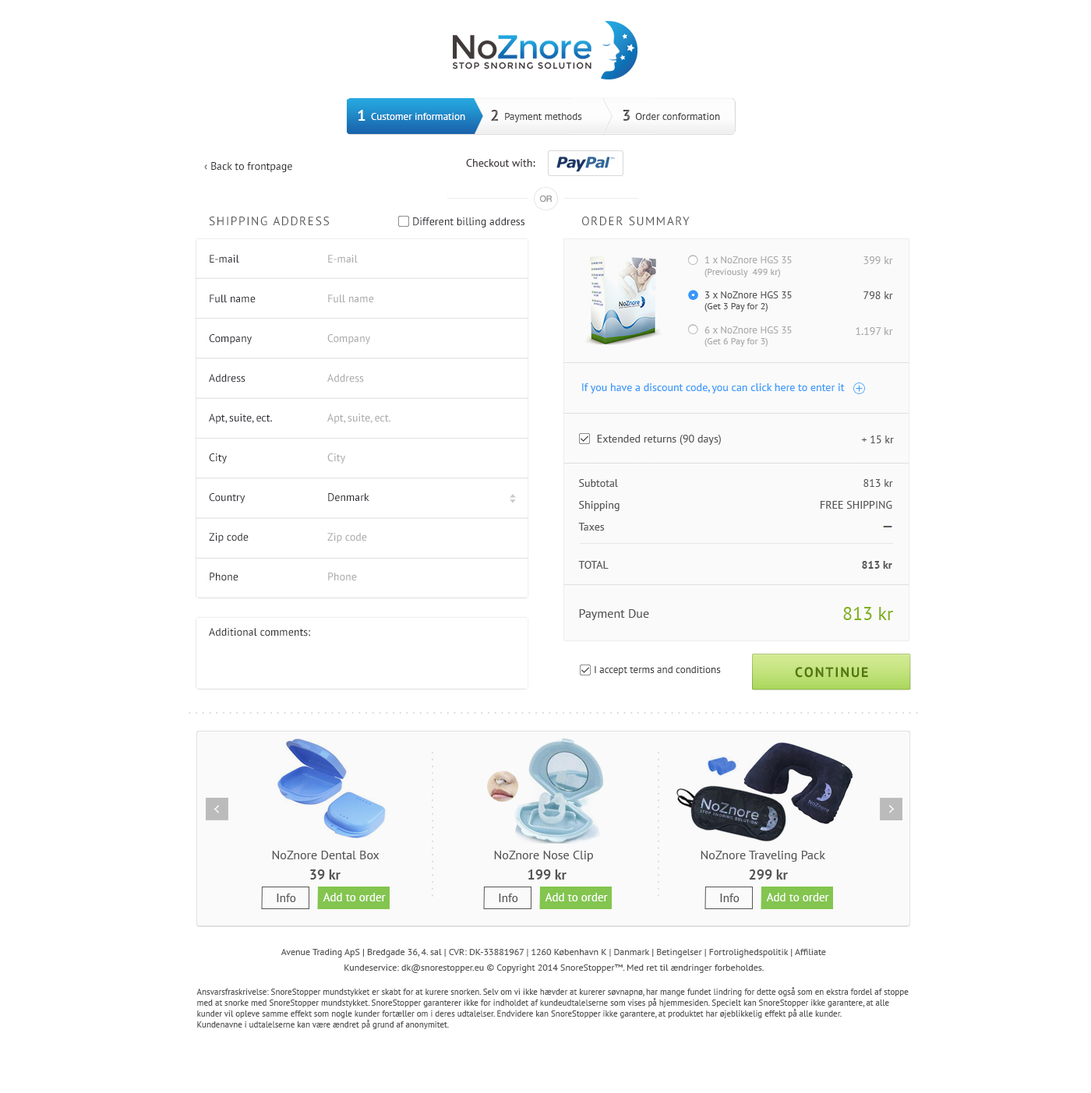
<style>
.page{position:relative;width:1091px;height:1093px;background:#ffffff}
.page>*{position:absolute;margin:0}
.t1{font:15.7px "PTSans-Bold";color:#ffffff}
.t2{font:10.2px "PTSans-Regular";color:#ffffff}
.t3{font:15.7px "PTSans-Bold"}
.t4{font:10.2px "PTSans-Regular";color:#454545}
.t5{font:10.2px "PTSans-Regular";color:#424242}
.t6{font:10.9px "PTSans-Regular";color:#403a3a}
.t7{font:10.9px "PTSans-Regular";color:#2f3035}
.t8{font:12px "PTSans-Regular";letter-spacing:0.1em;color:#555555;text-transform:uppercase}
.t9{font:10.9px "PTSans-Regular";color:#a2a2a2}
.t10{font:9.3px/11.7px "PTSans-Regular";color:#ababab}
.t11{font:10.1px/15.6px "PTSans-Regular";color:#ababab}
.t12{font:10.9px "PTSans-Regular";color:#ababab}
.t13{font:9.3px/10.9px "PTSans-Regular";color:#555555}
.t14{font:10.1px/12.5px "PTSans-Regular";color:#555555}
.t15{font:10.1px/15.6px "PTSans-Regular";color:#555555}
.t16{font:10.9px "PTSans-Regular";color:#555555}
.t17{font:9.3px/10.9px "PTSans-Regular";color:#ababab}
.t18{font:10.1px/12.5px "PTSans-Regular";color:#ababab}
.t19{font:10.9px "PTSans-Regular";color:#3998fb}
.t20{font:10.9px "PTSans-Bold";color:#555555}
.t21{font:12.5px "PTSans-Regular";color:#555555}
.t22{font:18.7px "PTSans-Regular";color:#80b11c}
.t23{font:10.1px "PTSans-Regular";color:#444444}
.t24{font:14px "PTSans-Bold";letter-spacing:0.1em;color:#54770f;text-transform:uppercase}
.t25{font:14.8px "PTSans-Regular";letter-spacing:0.18em;color:#dedbdb}
.t26{font:14px "PTSans-Bold";color:#555555}
.t27{font:11.7px "PTSans-Regular";color:#555555}
.t28{font:11.7px "PTSans-Regular";color:#ffffff}
.t29{font:9.3px/15.6px "PTSans-Regular";color:#555555}
.t30{font:8.6px/10.9px "PTSans-Regular";color:#555555}
</style>
<div class="page">
<p class="t1" style="left:358px;top:110px;width:7px;height:11px">1</p>
<p class="t2" style="left:371px;top:113px;width:94px;height:7px">Customer information</p>
<p class="t3" style="left:491px;top:110px;width:7px;height:11px">2</p>
<p class="t4" style="left:505px;top:113px;width:77px;height:9px">Payment methods</p>
<p class="t3" style="left:623px;top:110px;width:7px;height:11px">3</p>
<p class="t5" style="left:635px;top:113px;width:85px;height:7px">Order conformation</p>
<p class="t6" style="left:466px;top:159px;width:69px;height:8px">Checkout with:</p>
<p class="t7" style="left:204px;top:162px;width:88px;height:10px">‹ Back to frontpage</p>
<p class="t8" style="left:209px;top:217px;width:120px;height:9px">Shipping address</p>
<p class="t7" style="left:413px;top:217px;width:111px;height:11px">Different billing address</p>
<p class="t8" style="left:582px;top:217px;width:108px;height:9px">ORDER Summary</p>
<p class="t7" style="left:210px;top:255px;width:29px;height:8px">E-mail</p>
<p class="t9" style="left:328px;top:255px;width:30px;height:8px">E-mail</p>
<p class="t10" style="left:704px;top:256px;width:88px;height:21px;text-align:justify"><span class="t11">1 x NoZnore HGS 35<br></span>(Previously  499 kr)</p>
<p class="t12" style="left:863px;top:256px;width:30px;height:8px">399 kr</p>
<p class="t13" style="left:704px;top:291px;width:88px;height:21px;text-align:justify"><span class="t14">3 x NoZnore </span><span class="t15">HGS 35<br></span>(Get 3 Pay for 2)</p>
<p class="t16" style="left:863px;top:291px;width:30px;height:8px">798 kr</p>
<p class="t7" style="left:210px;top:295px;width:46px;height:8px">Full name</p>
<p class="t12" style="left:328px;top:295px;width:46px;height:8px">Full name</p>
<p class="t17" style="left:704px;top:326px;width:88px;height:21px;text-align:justify"><span class="t18">6 x NoZnore </span><span class="t11">HGS 35<br></span>(Get 6 Pay for 3)</p>
<p class="t12" style="left:856px;top:327px;width:37px;height:8px">1.197 kr</p>
<p class="t7" style="left:209px;top:334px;width:43px;height:10px">Company</p>
<p class="t12" style="left:327px;top:334px;width:43px;height:10px">Company</p>
<p class="t7" style="left:209px;top:374px;width:36px;height:9px">Address</p>
<p class="t12" style="left:327px;top:374px;width:37px;height:9px">Address</p>
<p class="t19" style="left:582px;top:383px;width:263px;height:10px">If you have a discount code, you can click here to enter it</p>
<p class="t7" style="left:209px;top:414px;width:63px;height:10px">Apt, suite, ect.</p>
<p class="t12" style="left:327px;top:414px;width:63px;height:10px">Apt, suite, ect.</p>
<p class="t16" style="left:597px;top:435px;width:124px;height:10px">Extended returns (90 days)</p>
<p class="t16" style="left:861px;top:436px;width:33px;height:7px">+ 15 kr</p>
<p class="t7" style="left:209px;top:453px;width:18px;height:11px">City</p>
<p class="t12" style="left:327px;top:453px;width:18px;height:11px">City</p>
<p class="t16" style="left:579px;top:479px;width:39px;height:8px">Subtotal</p>
<p class="t16" style="left:863px;top:479px;width:30px;height:8px">813 kr</p>
<p class="t7" style="left:209px;top:493px;width:36px;height:10px">Country</p>
<p class="t7" style="left:328px;top:493px;width:41px;height:9px">Denmark</p>
<p class="t16" style="left:579px;top:501px;width:40px;height:10px">Shipping</p>
<p class="t16" style="left:820px;top:501px;width:72px;height:8px">FREE SHIPPING</p>
<p class="t7" style="left:209px;top:533px;width:40px;height:10px">Zip code</p>
<p class="t12" style="left:327px;top:533px;width:40px;height:10px">Zip code</p>
<p class="t16" style="left:578px;top:523px;width:27px;height:8px">Taxes</p>
<p class="t16" style="left:578px;top:561px;width:31px;height:8px">TOTAL</p>
<p class="t20" style="left:862px;top:561px;width:30px;height:8px">813 kr</p>
<p class="t7" style="left:210px;top:573px;width:28px;height:8px">Phone</p>
<p class="t12" style="left:328px;top:573px;width:29px;height:8px">Phone</p>
<p class="t21" style="left:579px;top:609px;width:70px;height:11px">Payment Due</p>
<p class="t22" style="left:843px;top:607px;width:50px;height:13px">813 kr</p>
<p class="t7" style="left:209px;top:628px;width:101px;height:9px">Additional comments:</p>
<p class="t23" style="left:594px;top:666px;width:127px;height:10px">I accept terms and conditions</p>
<p class="t24" style="left:795px;top:667px;width:73px;height:11px">Continue</p>
<p class="t25" style="left:189px;top:712px;width:729px;height:2px">............................................................................................................</p>
<p class="t21" style="left:272px;top:851px;width:107px;height:8px">NoZnore Dental Box</p>
<p class="t21" style="left:494px;top:851px;width:99px;height:11px">NoZnore Nose Clip</p>
<p class="t21" style="left:700px;top:851px;width:125px;height:11px">NoZnore Traveling Pack</p>
<p class="t26" style="left:310px;top:870px;width:30px;height:10px">39 kr</p>
<p class="t26" style="left:527px;top:870px;width:39px;height:10px">199 kr</p>
<p class="t26" style="left:749px;top:870px;width:39px;height:10px">299 kr</p>
<p class="t27" style="left:277px;top:894px;width:19px;height:8px">Info</p>
<p class="t28" style="left:323px;top:893px;width:63px;height:8px">Add to order</p>
<p class="t27" style="left:499px;top:894px;width:19px;height:8px">Info</p>
<p class="t28" style="left:545px;top:893px;width:63px;height:8px">Add to order</p>
<p class="t27" style="left:720px;top:894px;width:19px;height:8px">Info</p>
<p class="t28" style="left:766px;top:893px;width:63px;height:8px">Add to order</p>
<p class="t29" style="left:280px;top:949px;width:546px;height:24px;text-align:center">Avenue Trading ApS | Bredgade 36, 4. sal | CVR: DK-33881967 | 1260 København K | Danmark | Betingelser | Fortrolighedspolitik | Affiliate <br>Kundeservice: dk@snorestopper.eu © Copyright 2014 SnoreStopper™. Med ret til ændringer forbeholdes.</p>
<p class="t30" style="left:196px;top:987px;width:712px;height:42px">Ansvarsfraskrivelse: SnoreStopper mundstykket er skabt for at kurere snorken. Selv om vi ikke hævder at kurerer søvnapnø, har mange fundet lindring for dette også som en ekstra fordel af stoppe med at snorke med SnoreStopper mundstykket. SnoreStopper garanterer ikke for indholdet af kundeudtalelserne som vises på hjemmesiden. Specielt kan SnoreStopper ikke garantere, at alle kunder vil opleve samme effekt som nogle kunder fortæller om i deres udtalelser. Endvidere kan SnoreStopper ikke garantere, at produktet har øjeblikkelig effekt på alle kunder. <br>Kundenavne i udtalelserne kan være ændret på grund af anonymitet.</p>
</div>
